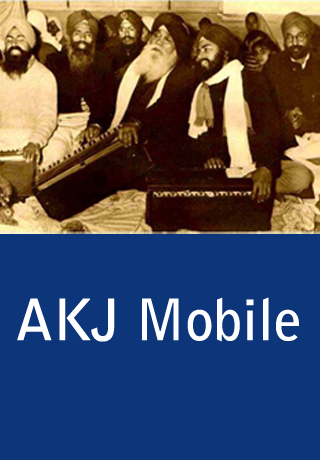
<style>
.page{position:relative;width:320px;height:460px;background:#0d367a}
.page>*{position:absolute;margin:0}
.t1{font:56.7px "BellGothicStd-Bold";color:#ffffff}
</style>
<div class="page">
<p class="t1" style="left:17px;top:297px;width:282px;height:45px">AKJ Mobile</p>
</div>
